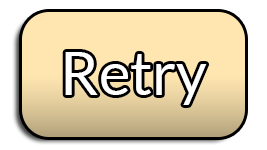
<style>
.page{position:relative;width:267px;height:150px;background:#ffe6b1}
.page>*{position:absolute;margin:0}
.t1{font:59.6px "Lato-Regular";color:#ffffff}
</style>
<div class="page">
<p class="t1" style="left:65px;top:52px;width:142px;height:53px">Retry</p>
</div>
